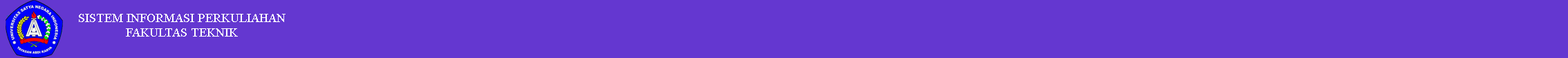
<style>
.page{position:relative;width:1568px;height:58px;background:#6437d0}
.page>*{position:absolute;margin:0}
.t1{font:12.4px "TimesNewRomanPSMT";color:#ffffff}
.t2{font:33.2px "TimesNewRomanPSMT";color:#ffffff}
</style>
<div class="page">
<p class="t1" style="left:79px;top:14px;width:207px;height:23px;text-align:center">SISTEM INFORMASI PERKULIAHAN<br>FAKULTAS TEKNIK<br><span class="t2">FAKULTAS</span></p>
</div>
